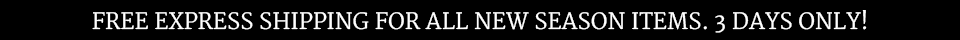
<style>
.page{position:relative;width:960px;height:40px;background:#000000}
.page>*{position:absolute;margin:0}
.t1{font:22px "Merriweather";color:#ffffff}
</style>
<div class="page">
<p class="t1" style="left:92px;top:10px;width:775px;height:23px">FREE EXPRESS SHIPPING FOR ALL NEW SEASON ITEMS. 3 DAYS ONLY!</p>
</div>
